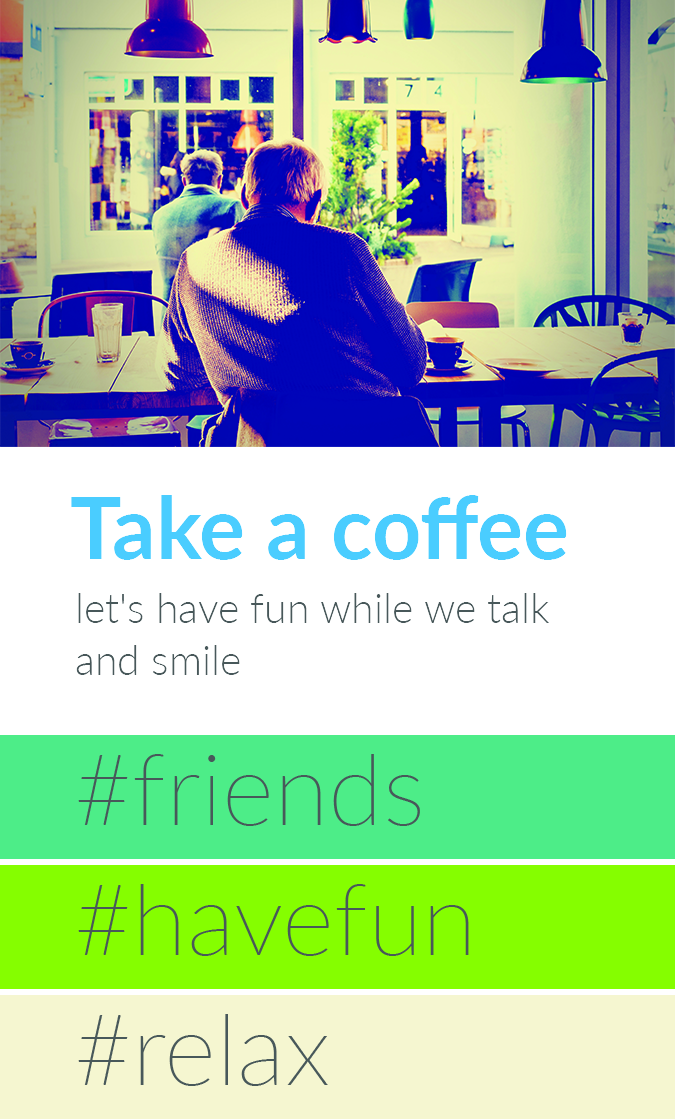
<style>
.page{position:relative;width:675px;height:1119px;background:#ffffff}
.page>*{position:absolute;margin:0}
.t1{font:86px "Lato-Bold";color:#4acdff}
.t2{font:41px/52px "Lato-Light";color:#48585a}
</style>
<div class="page">
<p class="t1" style="left:71px;top:495px;width:496px;height:65px">Take a coffee</p>
<p class="t2" style="left:76px;top:593px;width:473px;height:82px;text-align:right">let's have fun while we talk and smile</p>
</div>
